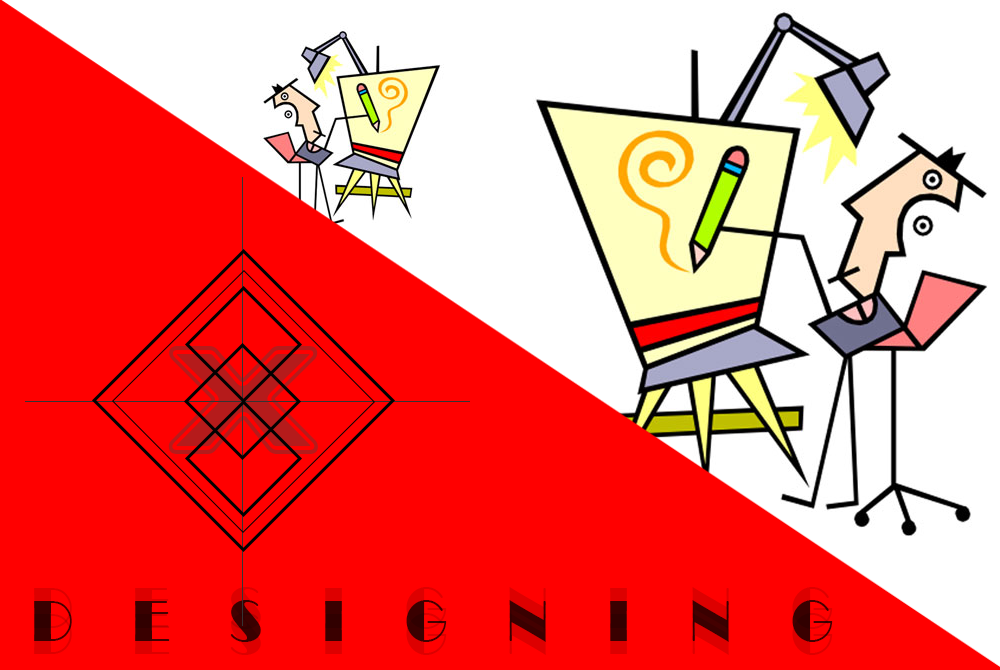
<style>
.page{position:relative;width:1000px;height:670px;background:#ff0000}
.page>*{position:absolute;margin:0}
.t1{font:156px "MilleniumBT-BoldExtended";color:#b51b1b}
.t2{font:60px "Broadway";letter-spacing:1.06em;scale:0.93 1}
.t3{font:60px "Broadway";letter-spacing:1.06em;color:#3a0000;scale:0.93 1}
</style>
<div class="page">
<p class="t1" style="left:168px;top:346px;width:150px;height:108px">X</p>
<p class="t2" style="left:34px;top:587px;width:799px;height:42px">DESIGNING</p>
<p class="t3" style="left:34px;top:600px;width:799px;height:42px">DESIGNING</p>
<p class="t2" style="left:34px;top:613px;width:799px;height:42px">DESIGNING</p>
</div>
